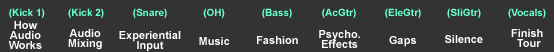
<style>
.page{position:relative;width:554px;height:52px;background:#333333}
.page>*{position:absolute;margin:0}
.t1{font:10px "Arial-BoldMT";color:#66ffcc}
.t2{font:11px/10px "Arial-BoldMT";color:#ffffff}
.t3{font:11px "Arial-BoldMT";color:#ffffff}
</style>
<div class="page">
<p class="t1" style="left:9px;top:8px;width:36px;height:10px">(Kick 1)</p>
<p class="t1" style="left:68px;top:8px;width:36px;height:10px">(Kick 2)</p>
<p class="t1" style="left:133px;top:8px;width:34px;height:10px">(Snare)</p>
<p class="t1" style="left:203px;top:8px;width:22px;height:10px">(OH)</p>
<p class="t1" style="left:262px;top:8px;width:30px;height:10px">(Bass)</p>
<p class="t1" style="left:322px;top:8px;width:34px;height:10px">(AcGtr)</p>
<p class="t1" style="left:385px;top:8px;width:36px;height:10px">(EleGtr)</p>
<p class="t1" style="left:447px;top:8px;width:34px;height:10px">(SliGtr)</p>
<p class="t1" style="left:508px;top:8px;width:38px;height:10px">(Vocals)</p>
<p class="t2" style="left:8px;top:21px;width:34px;height:28px;text-align:center">How<br>Audio<br>Works</p>
<p class="t2" style="left:68px;top:29px;width:34px;height:21px;text-align:center">Audio<br>Mixing</p>
<p class="t2" style="left:319px;top:30px;width:41px;height:18px;text-align:center">Psycho.<br>Effects</p>
<p class="t2" style="left:511px;top:29px;width:32px;height:18px;text-align:center">Finish <br>Tour</p>
<p class="t2" style="left:119px;top:31px;width:62px;height:21px;text-align:center">Experiential<br>Input</p>
<p class="t3" style="left:199px;top:37px;width:31px;height:8px">Music</p>
<p class="t3" style="left:257px;top:36px;width:41px;height:8px">Fashion</p>
<p class="t3" style="left:389px;top:36px;width:27px;height:11px">Gaps</p>
<p class="t3" style="left:445px;top:35px;width:38px;height:8px">Silence</p>
</div>
